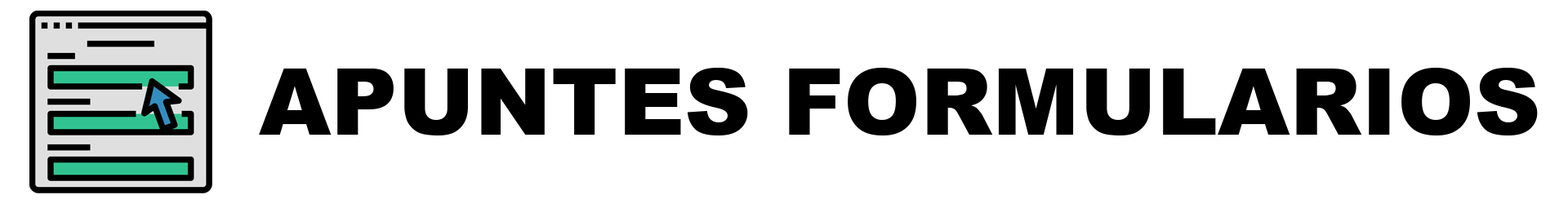
<style>
.page{position:relative;width:1568px;height:204px;background:#ffffff}
.page>*{position:absolute;margin:0}
.t1{font:92.3px "Arial-Black";color:#000000}
</style>
<div class="page">
<p class="t1" style="left:259px;top:68px;width:1279px;height:68px">APUNTES FORMULARIOS</p>
</div>
